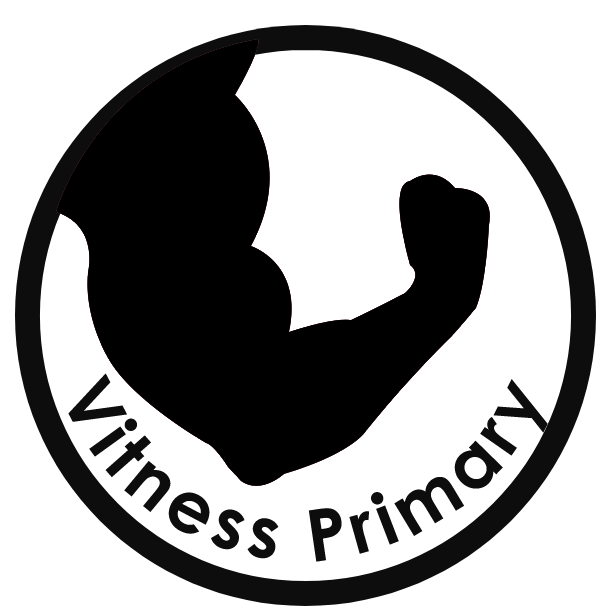
<style>
.page{position:relative;width:610px;height:610px;background:#ffffff}
.page>*{position:absolute;margin:0}
.t1{font:72px "CenturyGothic-Bold";letter-spacing:0.1em;color:#0d0d0d}
</style>
<div class="page">
<p class="t1" style="left:68px;top:373px;width:480px;height:189px;text-align:center">Vitness Primary</p>
</div>
